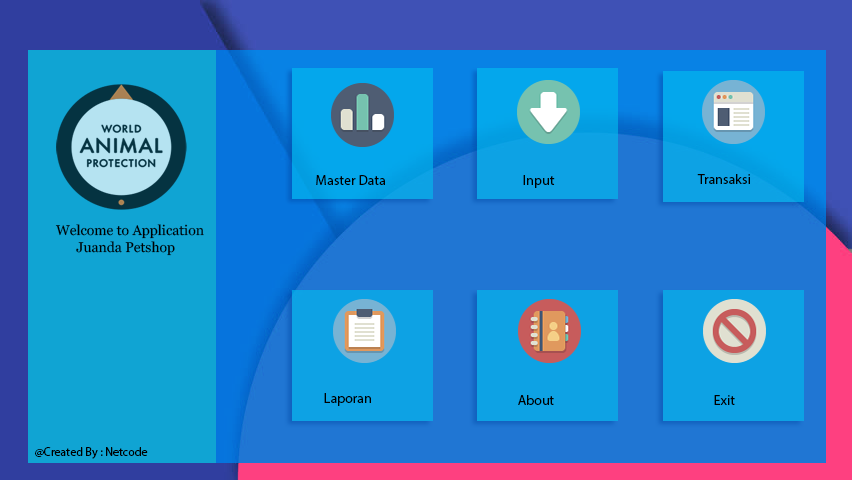
<style>
.page{position:relative;width:852px;height:480px;background:#2076d3}
.page>*{position:absolute;margin:0}
.t1{font:14px "MyriadPro-Regular";color:#000000}
.t2{font:14px "Vani";color:#000000}
.t3{font:12px "MyriadPro-Regular";color:#000000}
</style>
<div class="page">
<p class="t1" style="left:697px;top:174px;width:53px;height:10px">Transaksi</p>
<p class="t1" style="left:316px;top:175px;width:69px;height:10px">Master Data</p>
<p class="t1" style="left:523px;top:175px;width:32px;height:13px">Input</p>
<p class="t2" style="left:55px;top:224px;width:149px;height:32px">Welcome to Application<br>      Juanda Petshop</p>
<p class="t1" style="left:324px;top:393px;width:47px;height:13px">Laporan</p>
<p class="t1" style="left:518px;top:395px;width:36px;height:10px">About</p>
<p class="t1" style="left:714px;top:395px;width:21px;height:10px">Exit</p>
<p class="t3" style="left:35px;top:447px;width:113px;height:12px">@Created By : Netcode</p>
</div>
